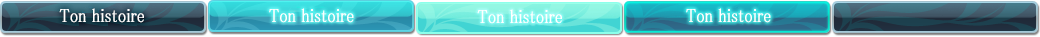
<style>
.page{position:relative;width:1040px;height:37px}
.page>*{position:absolute;margin:0}
.t1{font:19px "MS-PMincho";color:#ffffff;font-weight:bold;scale:0.84 1}
</style>
<div class="page">
<p class="t1" style="left:59px;top:8px;width:85px;height:15px">Ton histoire</p>
<p class="t1" style="left:269px;top:8px;width:85px;height:15px">Ton histoire</p>
<p class="t1" style="left:477px;top:9px;width:85px;height:15px">Ton histoire</p>
<p class="t1" style="left:686px;top:8px;width:85px;height:15px">Ton histoire</p>
</div>
